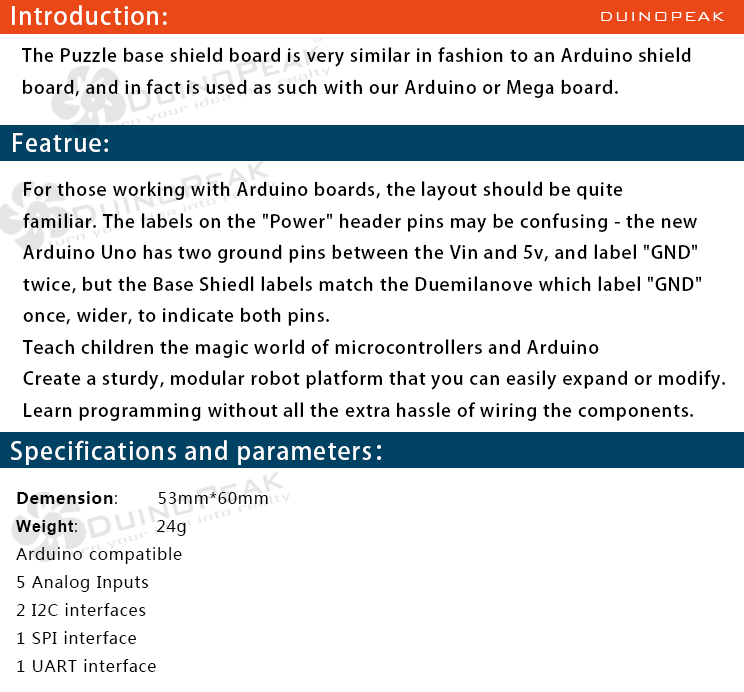
<style>
.page{position:relative;width:744px;height:692px;background:#ffffff}
.page>*{position:absolute;margin:0}
.t1{font:24px "AdobeHeitiStd-Regular";letter-spacing:0.05em;color:#ffffff}
.t2{font:18px "BankGothicBT-Light";letter-spacing:0.05em;color:#ffffff}
.t3{font:18px "AdobeHeitiStd-Regular";letter-spacing:0.05em;color:#000000}
.t4{font:16px "MicrosoftYaHei";letter-spacing:0.05em;color:#000000}
.t5{font:16px "MicrosoftYaHei-Bold";letter-spacing:0.05em;color:#000000}
.t6{font:16px "Arial-BoldMT";letter-spacing:0.05em;color:#000000}
.t7{font:16px "MicrosoftYaHei";letter-spacing:0.05em;color:#020202}
</style>
<div class="page">
<p class="t1" style="left:12px;top:5px;width:155px;height:20px">Introduction:</p>
<p class="t2" style="left:601px;top:12px;width:124px;height:9px">DUINOPEAK</p>
<p class="t3" style="left:21px;top:47px;width:670px;height:51px">The Puzzle base shield board is very similar in fashion to an Arduino shield <br>board, and in fact is used as such with our Arduino or Mega board.</p>
<p class="t1" style="left:13px;top:133px;width:95px;height:19px">Featrue:</p>
<p class="t3" style="left:22px;top:181px;width:703px;height:240px">For those working with Arduino boards, the layout should be quite <br>familiar. The labels on the "Power" header pins may be confusing - the new <br>Arduino Uno has two ground pins between the Vin and 5v, and label "GND" <br>twice, but the Base Shiedl labels match the Duemilanove which label "GND" <br>once, wider, to indicate both pins. <br>Teach children the magic world of microcontrollers and Arduino<br>Create a sturdy, modular robot platform that you can easily expand or modify.<br>Learn programming without all the extra hassle of wiring the components.</p>
<p class="t1" style="left:11px;top:440px;width:370px;height:25px">Specifications and parameters：</p>
<p class="t4" style="left:16px;top:491px;width:252px;height:181px"><span class="t5">Demension</span>:       53mm*60mm<br><span class="t6">Weight</span>:              24g<br>Arduino compatible<br>5 Analog Inputs<br>2 I2C <span class="t7">interfaces<br></span>1 SPI interface<br>1 UART interface</p>
</div>
